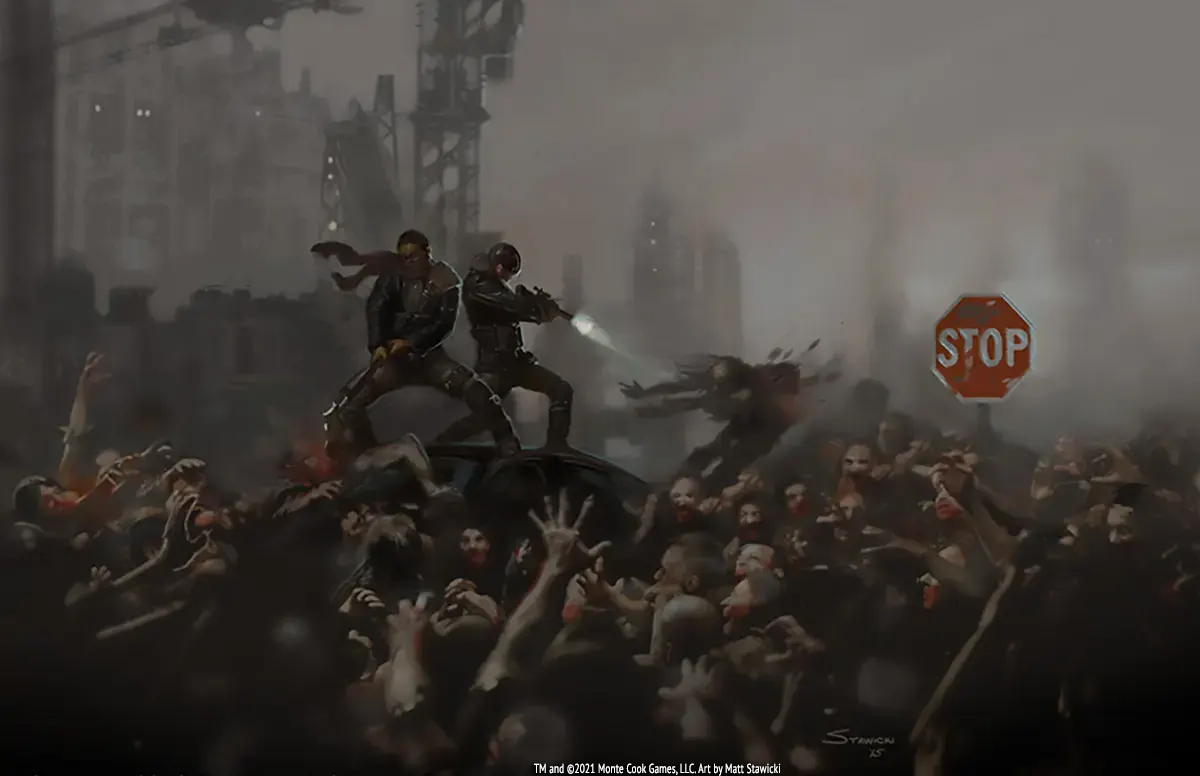
<style>
.page{position:relative;width:1200px;height:776px}
.page>*{position:absolute;margin:0}
.t1{font:13px "PTSans-Regular";letter-spacing:0.025em;color:#ffffff;scale:0.7 1}
</style>
<div class="page">
<p class="t1" style="left:534px;top:763px;width:247px;height:13px">TM and ©2021 Monte Cook Games, LLC. Art by Matt Stawicki</p>
</div>
